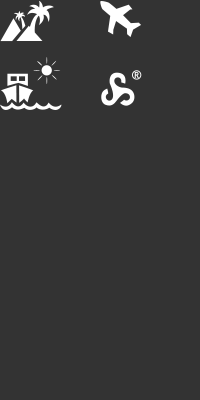
<style>
.page{position:relative;width:200px;height:400px;background:#333333}
.page>*{position:absolute;margin:0}
.t1{font:8.6px "SimHei";color:#ffffff}
</style>
<div class="page">
<p class="t1" style="left:134px;top:72px;width:5px;height:6px">R</p>
</div>
